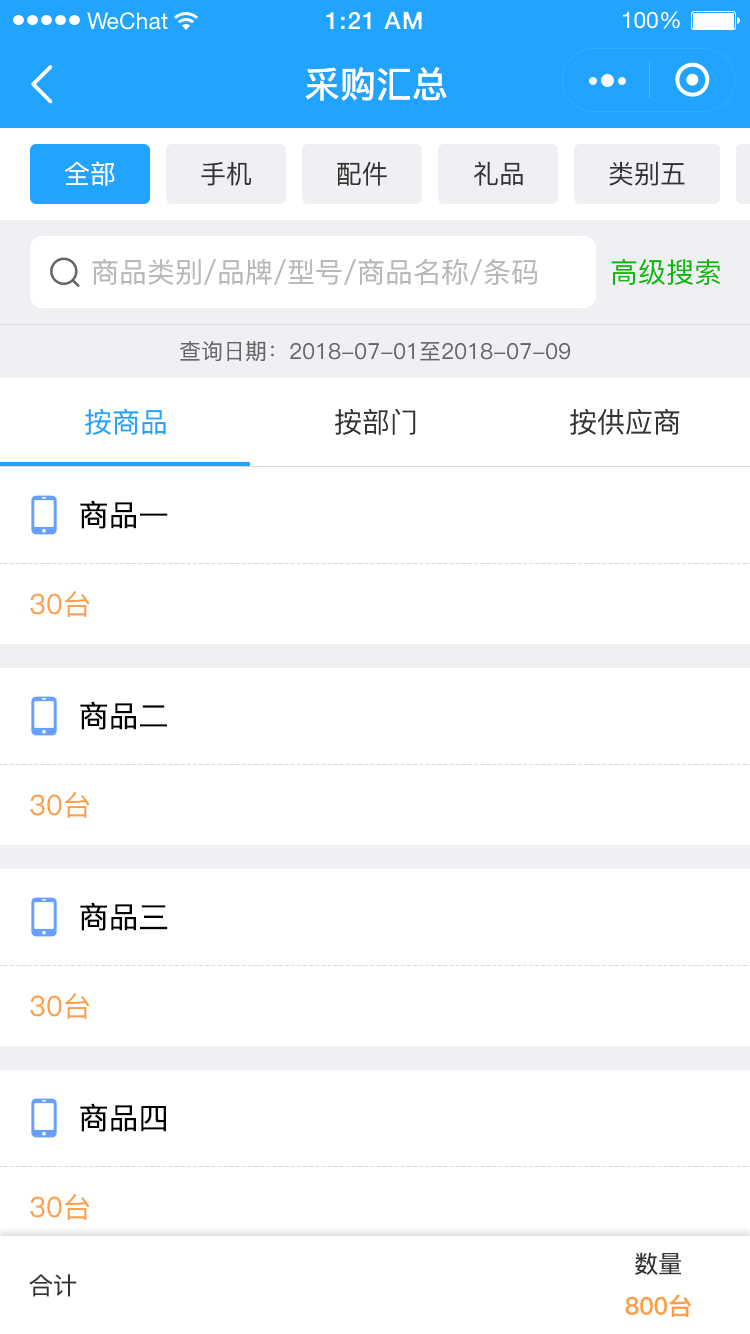
<style>
.page{position:relative;width:750px;height:1334px;background:#ffffff}
.page>*{position:absolute;margin:0}
.t1{font:36px "PingFang-SC-Bold";color:#ffffff}
.t2{font:26px "PingFang-SC-Medium";color:#ffffff}
.t3{font:26px "PingFang-SC-Medium";color:#333333}
.t4{font:28px "PingFang-SC-Medium";color:#b8b8b8}
.t5{font:28px "PingFang-SC-Medium";color:#09bb07}
.t6{font:22px "PingFang-SC-Medium";color:#666666}
.t7{font:28px "PingFang-SC-Medium";color:#21a4ff}
.t8{font:28px "PingFang-SC-Medium";color:#333333}
.t9{font:30px "PingFang-SC-Medium";color:#000000}
.t10{font:28px "PingFang-SC-Medium";color:#fe9f45}
.t11{font:24px "PingFang-SC-Medium";color:#333333}
.t12{font:24px "PingFang-SC-Bold";color:#fe9f45}
</style>
<div class="page">
<p class="t1" style="left:305px;top:67px;width:142px;height:34px">采购汇总</p>
<p class="t2" style="left:65px;top:161px;width:50px;height:25px">全部</p>
<p class="t3" style="left:201px;top:161px;width:50px;height:25px">手机</p>
<p class="t3" style="left:337px;top:161px;width:50px;height:25px">配件</p>
<p class="t3" style="left:474px;top:161px;width:49px;height:25px">礼品</p>
<p class="t3" style="left:609px;top:161px;width:76px;height:25px">类别五</p>
<p class="t4" style="left:92px;top:258px;width:445px;height:27px">商品类别/品牌/型号/商品名称/条码</p>
<p class="t5" style="left:611px;top:259px;width:109px;height:26px">高级搜索</p>
<p class="t6" style="left:180px;top:341px;width:391px;height:21px">查询日期：2018-07-01至2018-07-09</p>
<p class="t7" style="left:85px;top:409px;width:81px;height:26px">按商品</p>
<p class="t8" style="left:335px;top:409px;width:81px;height:26px">按部门</p>
<p class="t8" style="left:570px;top:409px;width:110px;height:26px">按供应商</p>
<p class="t9" style="left:80px;top:500px;width:88px;height:29px">商品一</p>
<p class="t10" style="left:30px;top:591px;width:60px;height:26px">30台</p>
<p class="t9" style="left:80px;top:701px;width:87px;height:29px">商品二</p>
<p class="t10" style="left:30px;top:792px;width:60px;height:26px">30台</p>
<p class="t9" style="left:80px;top:902px;width:88px;height:29px">商品三</p>
<p class="t10" style="left:30px;top:993px;width:60px;height:26px">30台</p>
<p class="t9" style="left:80px;top:1103px;width:86px;height:29px">商品四</p>
<p class="t10" style="left:30px;top:1194px;width:60px;height:26px">30台</p>
<p class="t11" style="left:635px;top:1252px;width:46px;height:23px">数量</p>
<p class="t11" style="left:29px;top:1274px;width:48px;height:23px">合计</p>
<p class="t12" style="left:625px;top:1294px;width:66px;height:23px">800台</p>
</div>
